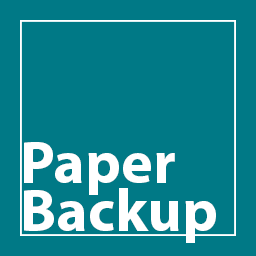
<style>
.page{position:relative;width:256px;height:256px;background:#007986}
.page>*{position:absolute;margin:0}
.t1{font:60px/48px "MyriadPro-Bold";color:#ffffff}
</style>
<div class="page">
<p class="t1" style="left:24px;top:142px;width:192px;height:101px">Paper<br>Backup</p>
</div>
